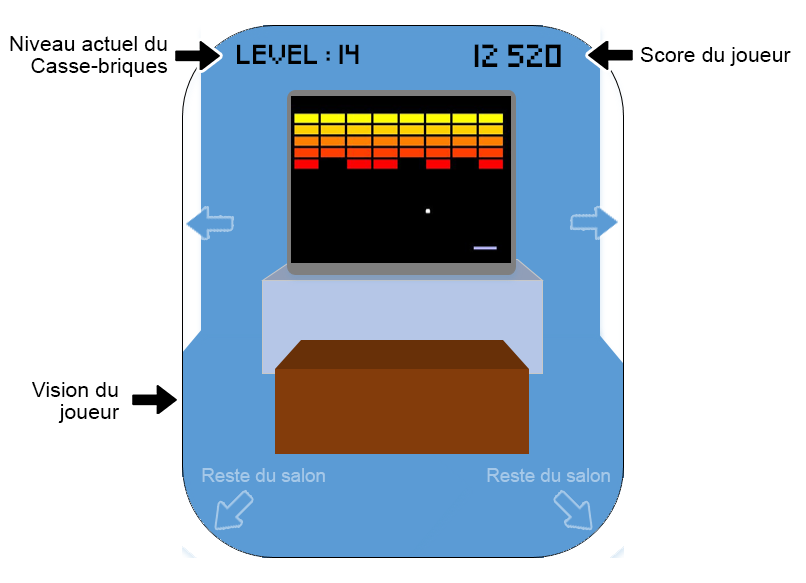
<style>
.page{position:relative;width:806px;height:583px;background:#ffffff}
.page>*{position:absolute;margin:0}
.t1{font:21.3px/21.3px "ArialMT";color:#000000}
.t2{font:16px "Pixeled";color:#000000}
.t3{font:18.7px "Pixeled";color:#000000}
.t4{font:21.3px "ArialMT";color:#000000}
.t5{font:18.7px "ArialMT";color:#a5c8e8}
</style>
<div class="page">
<p class="t1" style="left:10px;top:36px;width:158px;height:41px;text-align:right">Niveau actuel du Casse-briques</p>
<p class="t2" style="left:237px;top:44px;width:122px;height:20px">LEVEL : 14</p>
<p class="t3" style="left:474px;top:44px;width:87px;height:23px">12 520</p>
<p class="t4" style="left:640px;top:47px;width:151px;height:19px">Score du joueur</p>
<p class="t1" style="left:32px;top:382px;width:88px;height:41px;text-align:right">Vision du joueur</p>
<p class="t5" style="left:202px;top:468px;width:123px;height:14px">Reste du salon</p>
<p class="t5" style="left:487px;top:468px;width:123px;height:14px">Reste du salon</p>
</div>
